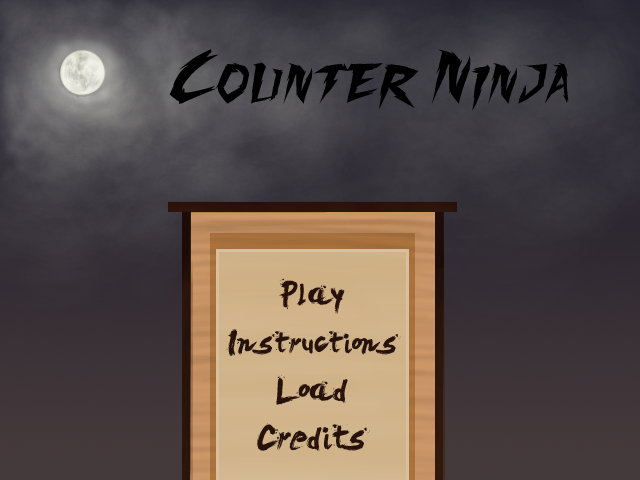
<style>
.page{position:relative;width:640px;height:480px}
.page>*{position:absolute;margin:0}
.t1{font:60px "FightingSpiritTBS";color:#000000}
.t2{font:34px/24px "LeviBrush";color:#26120b}
.t3{font:30px/24px "LeviBrush";color:#26120b}
</style>
<div class="page">
<p class="t1" style="left:169px;top:49px;width:400px;height:62px">Counter Ninja</p>
<p class="t2" style="left:226px;top:278px;width:175px;height:174px;text-align:center">Play<br><br><span class="t3">Instructions<br></span><br>Load<br><br>Credits</p>
</div>
